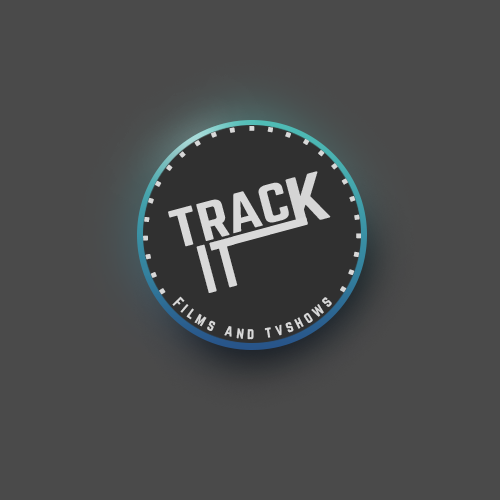
<style>
.page{position:relative;width:500px;height:500px;background:#4a4a4a}
.page>*{position:absolute;margin:0}
.t1{font:60.2px "Norwester-Regular";color:#d9d9d9}
.t2{font:14px "Norwester-Regular";letter-spacing:0.3em;color:#d8d8d8}
</style>
<div class="page">
<p class="t1" style="left:196px;top:237px;width:42px;height:56px;rotate:-15deg">IT</p>
<p class="t2" style="left:172px;top:296px;width:160px;height:44px">Films and tvshows</p>
</div>
